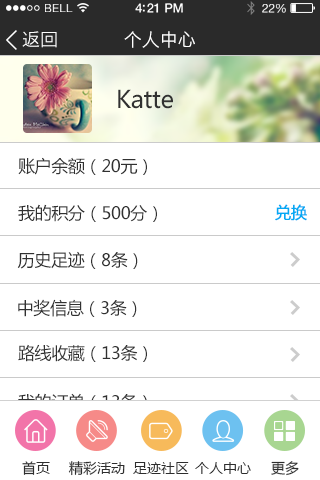
<style>
.page{position:relative;width:320px;height:480px;background:#ffffff}
.page>*{position:absolute;margin:0}
.t1{font:11.9px "HelveticaNeue";letter-spacing:0.02em;color:#ffffff;scale:0.97 1}
.t2{font:13px "HelveticaNeue-Medium";letter-spacing:-0.02em;color:#ffffff;scale:0.97 1}
.t3{font:12.4px "HelveticaNeue";letter-spacing:-0.02em;color:#ffffff;scale:0.97 1}
.t4{font:18px "HiraginoSansGB-W3";color:#ffffff}
.t5{font:18px "STHeitiSC-Light";color:#ffffff}
.t6{font:24px "MicrosoftYaHei";letter-spacing:-0.02em;color:#313131}
.t7{font:17px "MicrosoftYaHei";letter-spacing:-0.02em;color:#313131}
.t8{font:16px "MicrosoftYaHei";letter-spacing:-0.02em;color:#03a9f4;font-weight:bold}
.t9{font:17px "MicrosoftYaHei";letter-spacing:-0.02em}
.t10{font:14px "MicrosoftYaHei";color:#2d2d2d}
</style>
<div class="page">
<p class="t1" style="left:45px;top:4px;width:28px;height:8px">BELL</p>
<p class="t2" style="left:135px;top:3px;width:48px;height:10px">4:21 PM</p>
<p class="t3" style="left:262px;top:4px;width:24px;height:9px">22%</p>
<p class="t4" style="left:22px;top:31px;width:35px;height:17px">返回</p>
<p class="t5" style="left:124px;top:31px;width:71px;height:17px">个人中心</p>
<p class="t6" style="left:118px;top:89px;width:55px;height:20px">Katte</p>
<p class="t7" style="left:18px;top:157px;width:129px;height:18px">账户余额（20元）</p>
<p class="t7" style="left:18px;top:204px;width:139px;height:18px">我的积分（500分）</p>
<p class="t8" style="left:275px;top:204px;width:32px;height:17px">兑换</p>
<p class="t7" style="left:17px;top:251px;width:121px;height:18px">历史足迹（8条）</p>
<p class="t7" style="left:18px;top:299px;width:119px;height:18px">中奖信息（3条）</p>
<p class="t7" style="left:18px;top:344px;width:129px;height:18px">路线收藏（13条）</p>
<p class="t9" style="left:18px;top:393px;width:129px;height:18px">我的订单（13条）</p>
<p class="t10" style="left:22px;top:461px;width:28px;height:14px">首页</p>
<p class="t10" style="left:68px;top:461px;width:57px;height:15px">精彩活动</p>
<p class="t10" style="left:133px;top:462px;width:56px;height:12px">足迹社区</p>
<p class="t10" style="left:195px;top:462px;width:56px;height:12px">个人中心</p>
<p class="t10" style="left:271px;top:461px;width:28px;height:15px">更多</p>
</div>
